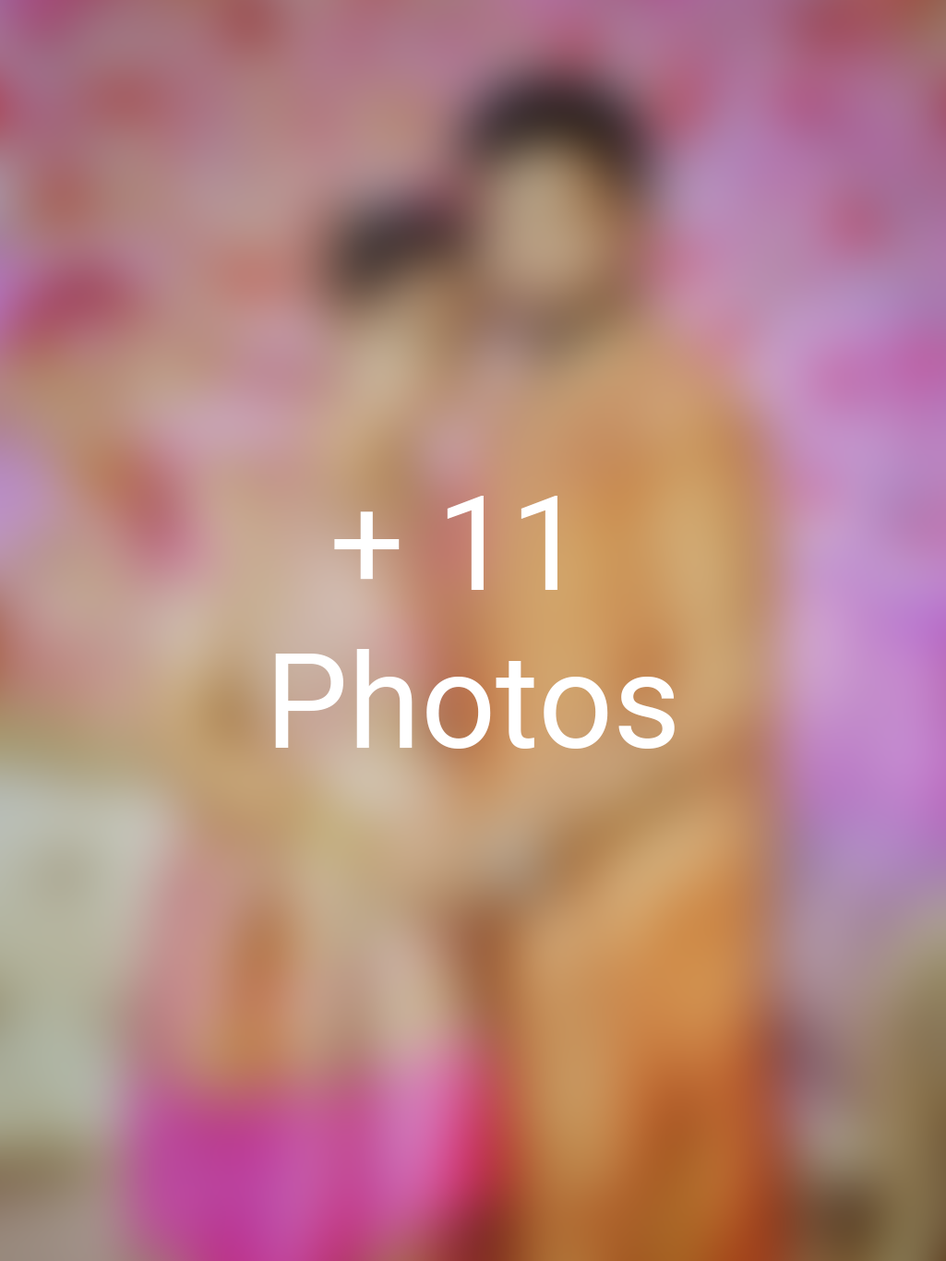
<style>
.page{position:relative;width:946px;height:1261px}
.page>*{position:absolute;margin:0}
.t1{font:131.7px "Roboto-Regular";color:#ffffff}
</style>
<div class="page">
<p class="t1" style="left:275px;top:496px;width:400px;height:252px;text-align:center">+ 11 <br>Photos</p>
</div>
